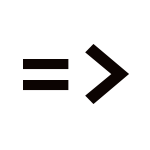
<style>
.page{position:relative;width:150px;height:150px;background:#ffffff}
.page>*{position:absolute;margin:0}
.t1{font:108px "Consolas-Bold";color:#0c0402}
</style>
<div class="page">
<p class="t1" style="left:23px;top:44px;width:106px;height:60px">=&gt;</p>
</div>
